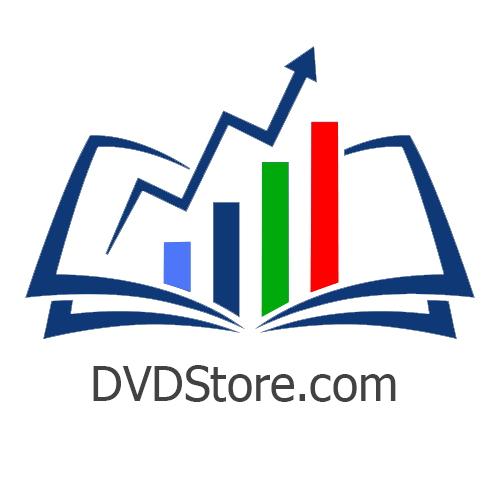
<style>
.page{position:relative;width:500px;height:500px;background:#ffffff}
.page>*{position:absolute;margin:0}
.t1{font:48px "Tahoma";color:#424242}
</style>
<div class="page">
<p class="t1" style="left:93px;top:365px;width:303px;height:37px">DVDStore.com</p>
</div>
